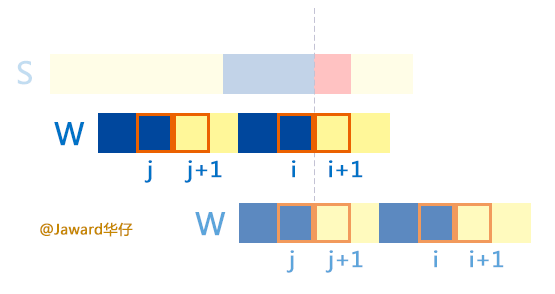
<style>
.page{position:relative;width:555px;height:294px;background:#ffffff}
.page>*{position:absolute;margin:0}
.t1{font:30px "MicrosoftYaHei";color:#c2ddf1;font-weight:bold}
.t2{font:30px "MicrosoftYaHei";color:#0072c6;font-weight:bold}
.t3{font:21.3px "MicrosoftYaHei";color:#0072c6;font-weight:bold}
.t4{font:14px "MicrosoftYaHei";color:#c68700;font-weight:bold}
.t5{font:30px "MicrosoftYaHei";color:#5ca5db;font-weight:bold}
.t6{font:21.3px "MicrosoftYaHei";color:#5ca5db;font-weight:bold}
</style>
<div class="page">
<p class="t1" style="left:17px;top:60px;width:15px;height:25px">S</p>
<p class="t2" style="left:54px;top:122px;width:31px;height:24px">W</p>
<p class="t3" style="left:144px;top:160px;width:8px;height:23px">j</p>
<p class="t3" style="left:184px;top:160px;width:38px;height:23px">j+1</p>
<p class="t3" style="left:292px;top:160px;width:4px;height:18px">i</p>
<p class="t3" style="left:329px;top:160px;width:34px;height:18px">i+1</p>
<p class="t4" style="left:40px;top:222px;width:93px;height:15px">@Jaward华仔</p>
<p class="t5" style="left:195px;top:212px;width:31px;height:24px">W</p>
<p class="t6" style="left:286px;top:250px;width:8px;height:23px">j</p>
<p class="t6" style="left:325px;top:250px;width:38px;height:23px">j+1</p>
<p class="t6" style="left:434px;top:250px;width:4px;height:18px">i</p>
<p class="t6" style="left:470px;top:250px;width:34px;height:18px">i+1</p>
</div>
